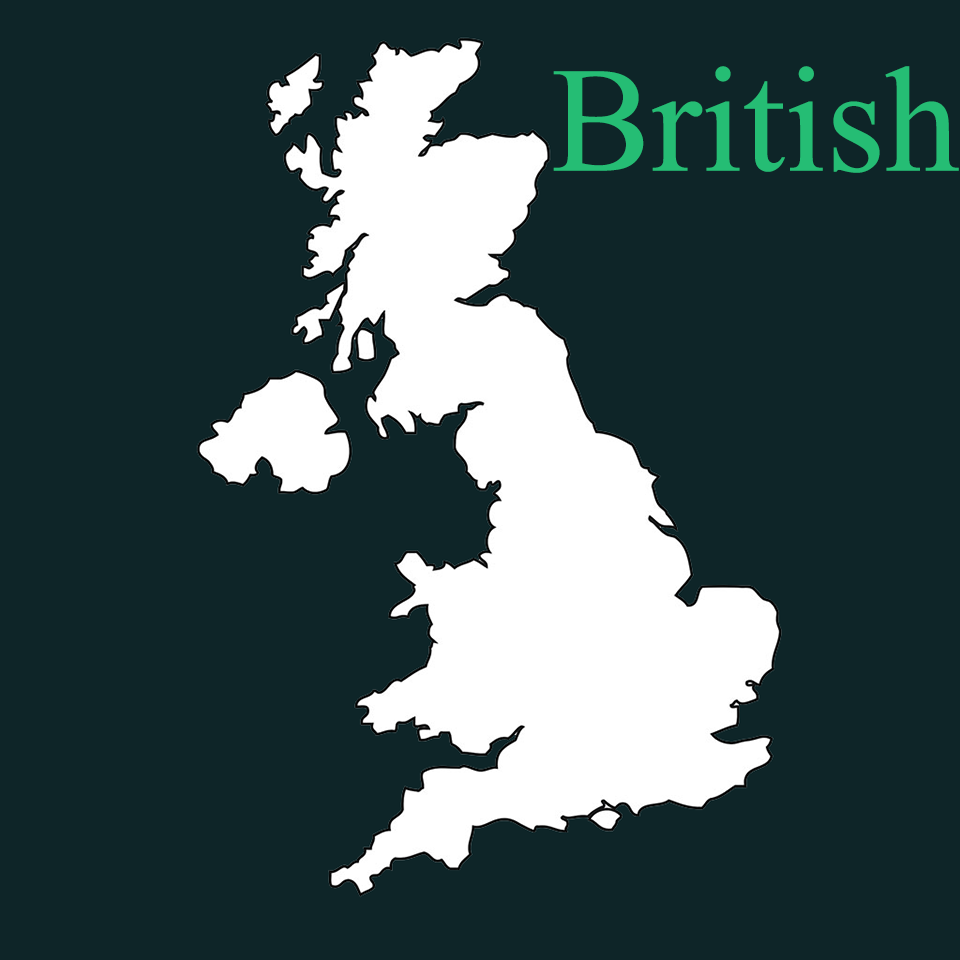
<style>
.page{position:relative;width:960px;height:960px;background:#0e2528}
.page>*{position:absolute;margin:0}
.t1{font:150px "TimesNewRomanPSMT";color:#25bd74}
</style>
<div class="page">
<p class="t1" style="left:553px;top:66px;width:406px;height:107px">British</p>
</div>
